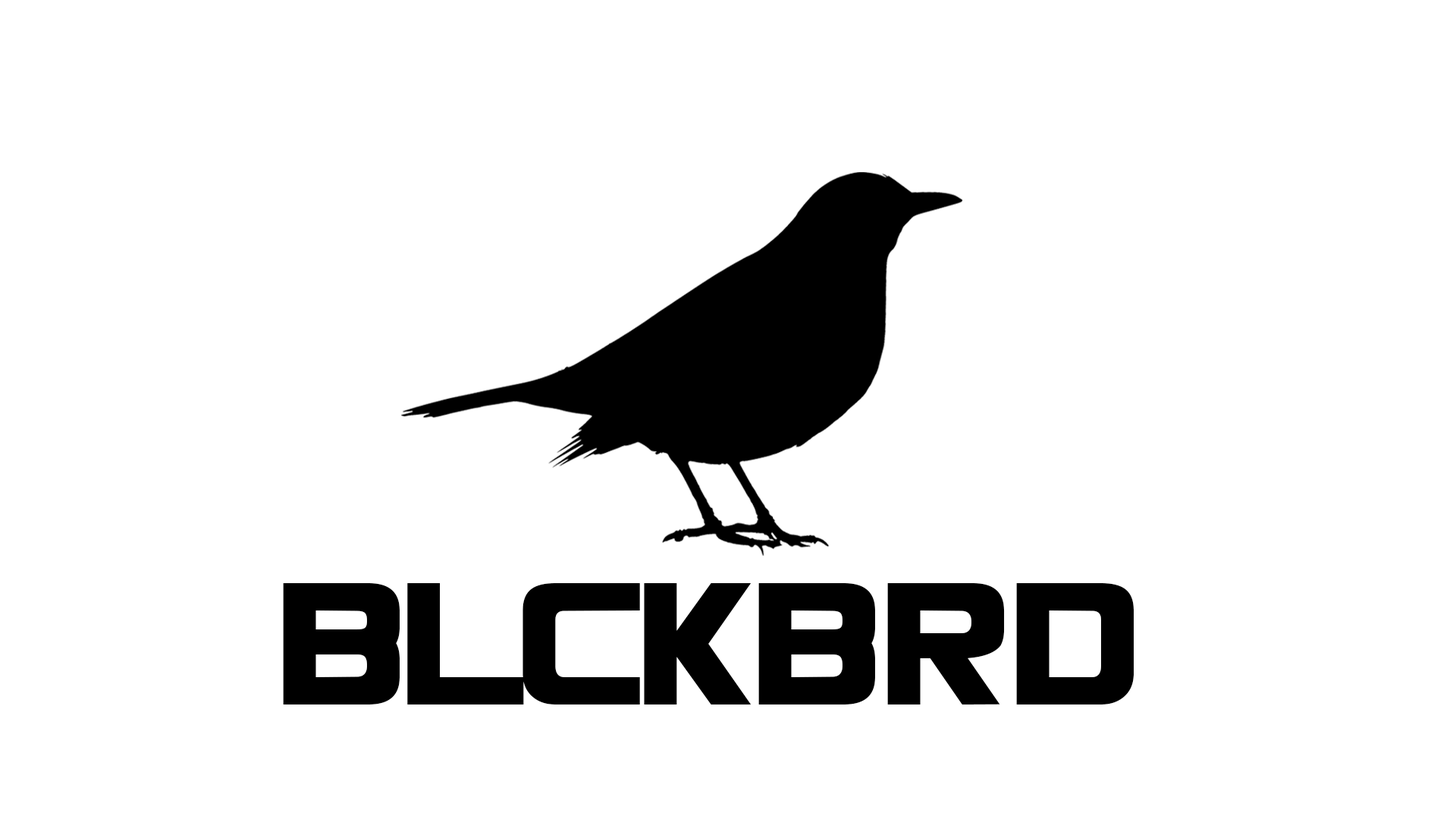
<style>
.page{position:relative;width:1456px;height:819px;background:#ffffff}
.page>*{position:absolute;margin:0}
.t1{font:151.7px "DieHundNormal";color:#000000}
</style>
<div class="page">
<p class="t1" style="left:283px;top:583px;width:851px;height:121px">BLCKBRD</p>
</div>
